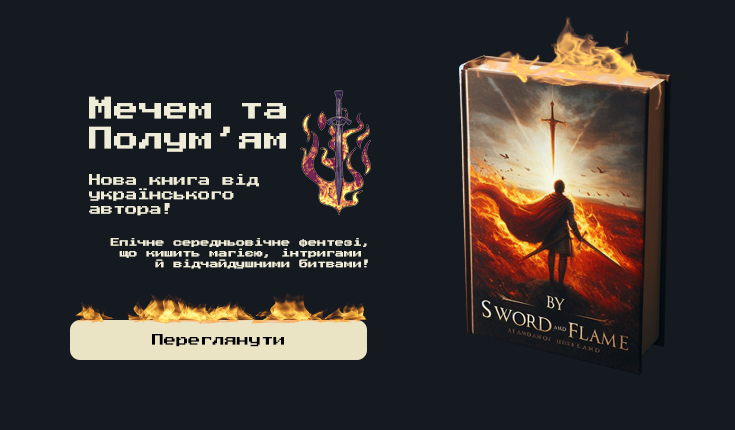
<style>
.page{position:relative;width:735px;height:430px;background:#151a21}
.page>*{position:absolute;margin:0}
.t1{font:25px "PressStart2P-Regular";color:#efedd8}
.t2{font:12.1px "PressStart2P-Regular";color:#efedd8}
.t3{font:9px "PressStart2P-Regular";color:#efedd8}
.t4{font:12.1px "PressStart2P-Regular";color:#000000}
</style>
<div class="page">
<p class="t1" style="left:89px;top:96px;width:197px;height:56px;text-align:center">Мечем та<br>Полум’ям</p>
<p class="t2" style="left:89px;top:174px;width:170px;height:42px">Нова книга від<br>українського<br>автора!</p>
<p class="t3" style="left:110px;top:238px;width:258px;height:31px;text-align:right">Епічне середньовічне фентезі,<br>що кишить магією, інтригами <br>й відчайдушними битвами!</p>
<p class="t4" style="left:152px;top:334px;width:132px;height:13px">Переглянути</p>
</div>
